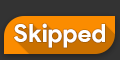
<style>
.page{position:relative;width:120px;height:60px;background:#333333}
.page>*{position:absolute;margin:0}
.t1{font:25px "ProductSans-Bold";color:#ffffff}
</style>
<div class="page">
<p class="t1" style="left:14px;top:23px;width:91px;height:25px">Skipped</p>
</div>
